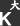
<style>
.page{position:relative;width:20px;height:26px;background:#333333}
.page>*{position:absolute;margin:0}
.t1{font:12px "DFKaiShu-SB-Estd-BF";color:#ffffff;font-weight:bold}
.t2{font:18px "ArialMT";color:#ffffff;font-weight:bold}
</style>
<div class="page">
<p class="t1" style="left:9px;top:0px;width:12px;height:10px">大</p>
<p class="t2" style="left:0px;top:12px;width:12px;height:14px">K</p>
</div>
